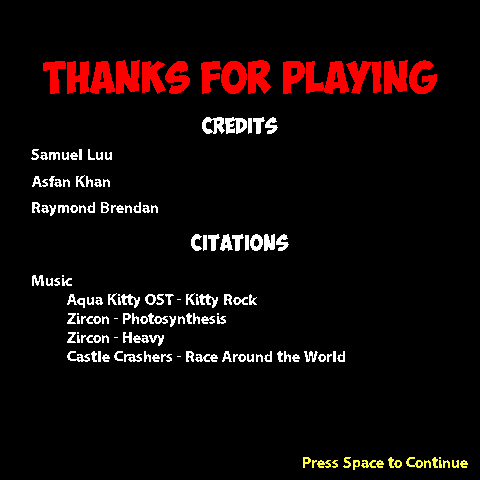
<style>
.page{position:relative;width:480px;height:480px;background:#000000}
.page>*{position:absolute;margin:0}
.t1{font:32px "ObelixPro";color:#ff0000}
.t2{font:16px "ObelixPro";color:#ffffff}
.t3{font:16px "LooseySans";color:#ffffff}
.t4{font:16px "LooseySans";color:#ffff40}
</style>
<div class="page">
<p class="t1" style="left:43px;top:60px;width:394px;height:34px">thanks for playing</p>
<p class="t2" style="left:202px;top:117px;width:76px;height:17px">CREDITS</p>
<p class="t3" style="left:31px;top:149px;width:81px;height:11px">Samuel Luu</p>
<p class="t3" style="left:32px;top:175px;width:78px;height:12px">Asfan Khan</p>
<p class="t3" style="left:32px;top:202px;width:126px;height:14px">Raymond Brendan</p>
<p class="t2" style="left:191px;top:234px;width:98px;height:17px">CITATIONS</p>
<p class="t3" style="left:32px;top:275px;width:313px;height:87px">Music<br> Aqua Kitty OST - Kitty Rock<br> Zircon - Photosynthesis<br> Zircon - Heavy<br> Castle Crashers - Race Around the World</p>
<p class="t4" style="left:303px;top:457px;width:165px;height:13px">Press Space to Continue</p>
</div>
